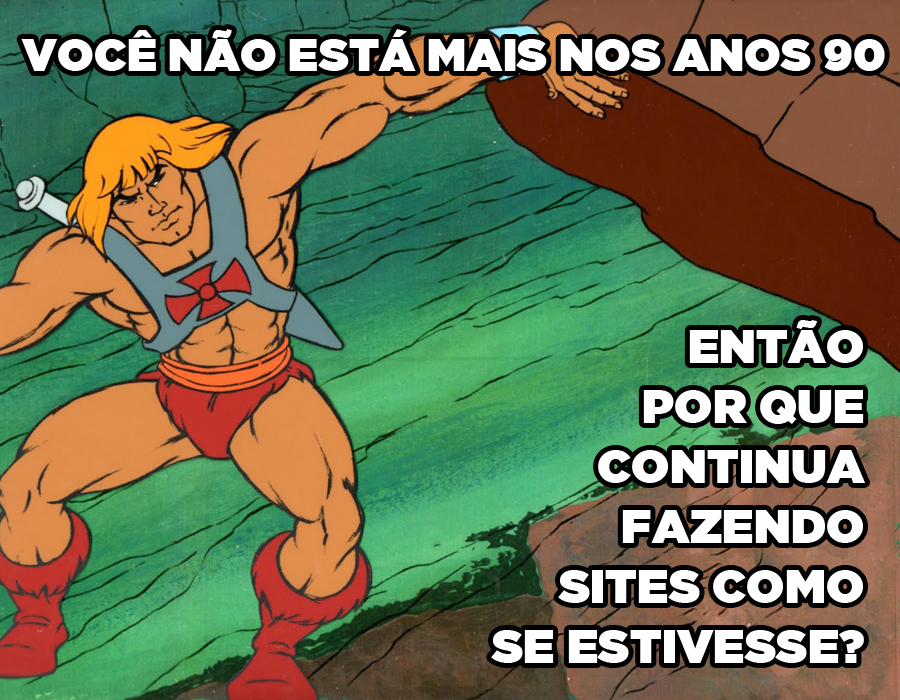
<style>
.page{position:relative;width:900px;height:700px}
.page>*{position:absolute;margin:0}
.t1{font:45.4px "GothamUltra";color:#ffffff}
.t2{font:47.4px/60px "GothamUltra";color:#ffffff}
</style>
<div class="page">
<p class="t1" style="left:21px;top:29px;width:864px;height:42px">VOCÊ NÃO ESTÁ MAIS NOS ANOS 90</p>
<p class="t2" style="left:491px;top:320px;width:375px;height:343px;text-align:right">ENTÃO<br> POR QUE<br>CONTINUA<br> FAZENDO<br>SITES COMO<br>SE ESTIVESSE?</p>
</div>
